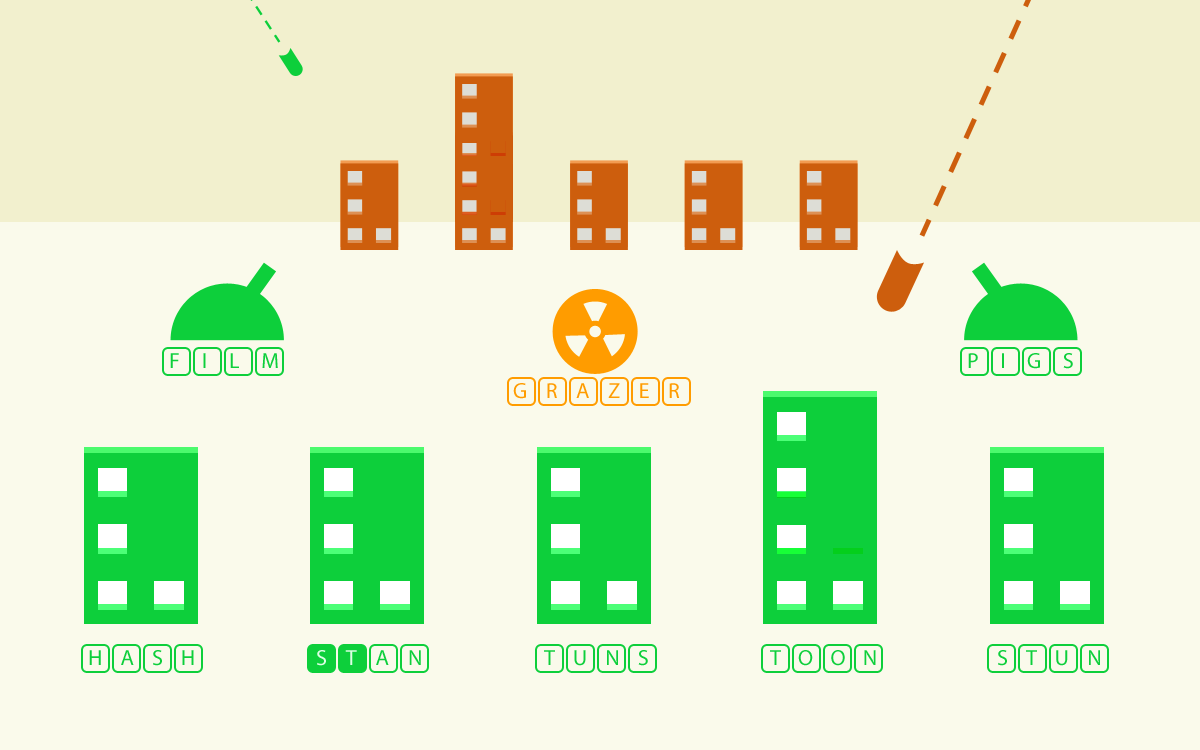
<style>
.page{position:relative;width:1200px;height:750px;background:#fafaeb}
.page>*{position:absolute;margin:0}
.t1{font:22px "MyriadPro-Regular";letter-spacing:1em;color:#0dcf3b}
.t2{font:22px "MyriadPro-Regular";letter-spacing:0.98em;color:#0dcf3b}
.t3{font:22px "MyriadPro-Regular";letter-spacing:0.84em;color:#ff9c00}
.t4{font:22px "MyriadPro-Regular";letter-spacing:0.82em;color:#0dcf3b}
.t5{font:22px "MyriadPro-Regular";letter-spacing:0.78em;color:#0dcf3b}
</style>
<div class="page">
<p class="t1" style="left:170px;top:353px;width:108px;height:15px">FILM</p>
<p class="t2" style="left:968px;top:353px;width:105px;height:16px">PIGS</p>
<p class="t3" style="left:513px;top:383px;width:167px;height:16px">GRAZER</p>
<p class="t4" style="left:89px;top:650px;width:105px;height:16px">HASH</p>
<p class="t4" style="left:544px;top:650px;width:104px;height:16px">TUNS</p>
<p class="t5" style="left:770px;top:650px;width:106px;height:16px">TOON</p>
<p class="t4" style="left:998px;top:650px;width:102px;height:16px">STUN</p>
</div>
